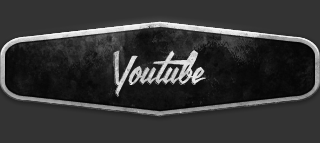
<style>
.page{position:relative;width:320px;height:143px;background:#333333}
.page>*{position:absolute;margin:0}
.t1{font:72px "the-Citizens";color:#d1d1d1}
</style>
<div class="page">
<p class="t1" style="left:113px;top:50px;width:93px;height:47px">Youtube</p>
</div>
